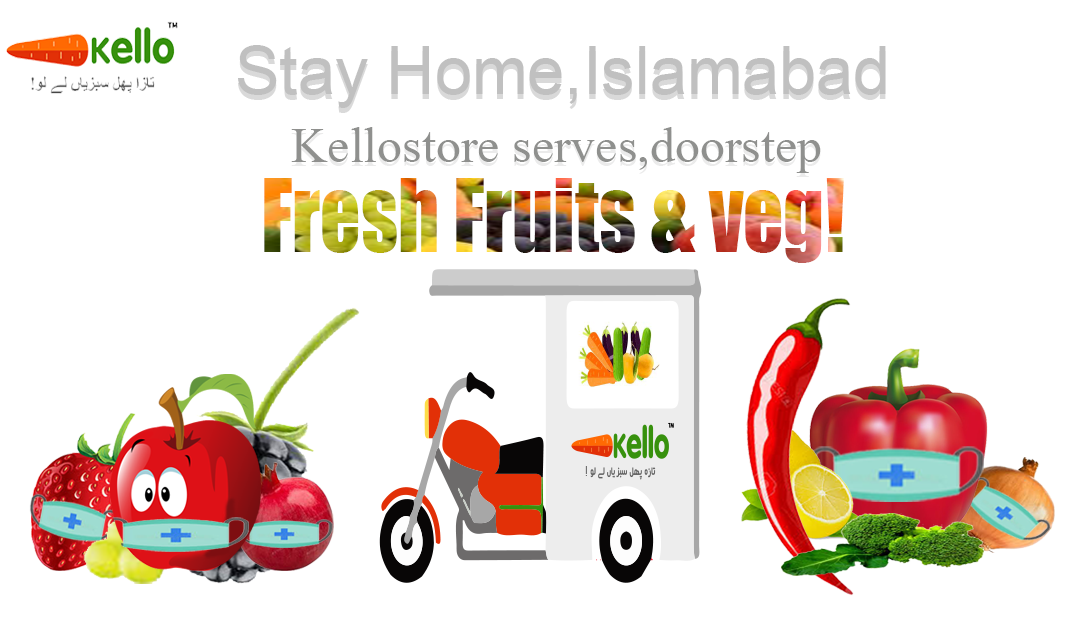
<style>
.page{position:relative;width:1080px;height:620px;background:#ffffff}
.page>*{position:absolute;margin:0}
.t1{font:66.7px "ArialMT";color:#c0c0c0}
.t2{font:50px "MongolianBaiti";color:#8f908e}
.t3{font:94px "Impact";scale:0.84 1}
</style>
<div class="page">
<p class="t1" style="left:238px;top:45px;width:648px;height:63px">Stay Home,Islamabad</p>
<p class="t2" style="left:291px;top:127px;width:530px;height:46px">Kellostore serves,doorstep</p>
<p class="t3" style="left:264px;top:178px;width:580px;height:85px">Fresh Fruits &amp; veg!</p>
</div>
